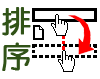
<style>
.page{position:relative;width:100px;height:79px;background:#ffffff}
.page>*{position:absolute;margin:0}
.t1{font:30px/80px "DFYuan-W5-WIN-BF";color:#305217;font-weight:bold}
</style>
<div class="page">
<p class="t1" style="left:2px;top:7px;width:29px;height:64px">排 序</p>
</div>
